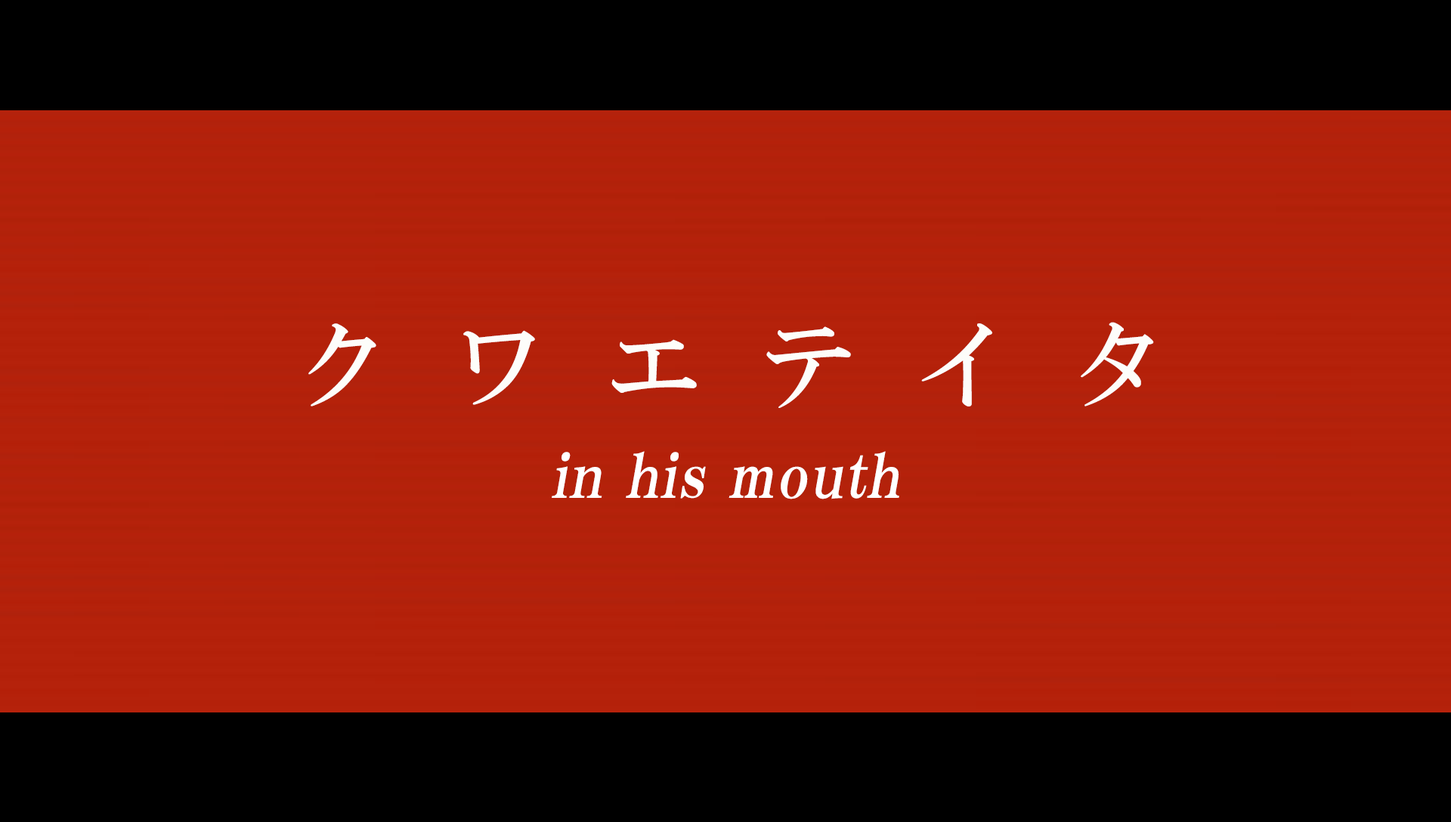
<style>
.page{position:relative;width:1451px;height:822px;background:#000000}
.page>*{position:absolute;margin:0}
.t1{font:95.2px "HGMinchoB";letter-spacing:0.63em;color:#fdfdfa}
.t2{font:60.4px "HGPMinchoE";letter-spacing:0.025em;color:#ffffff;font-style:italic}
</style>
<div class="page">
<p class="t1" style="left:308px;top:322px;width:846px;height:86px">クワエテイタ</p>
<p class="t2" style="left:552px;top:451px;width:347px;height:48px">in his mouth</p>
</div>
